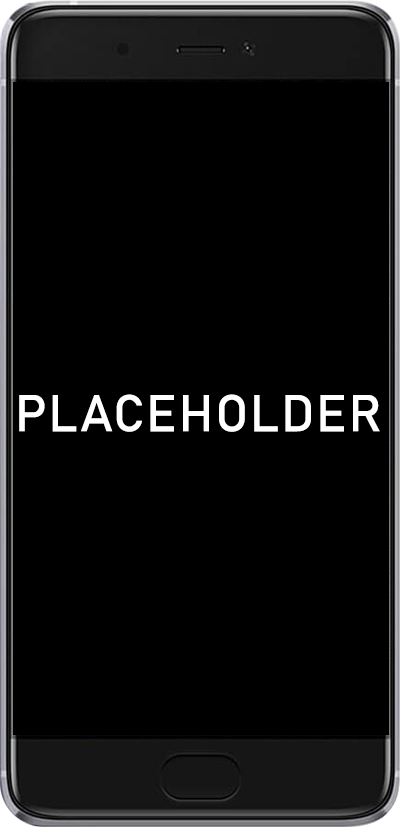
<style>
.page{position:relative;width:400px;height:827px;background:#000000}
.page>*{position:absolute;margin:0}
.t1{font:51px "Bahnschrift";letter-spacing:0.04em;color:#ffffff;text-transform:uppercase;font-weight:bold}
</style>
<div class="page">
<p class="t1" style="left:19px;top:394px;width:361px;height:38px">Placeholder</p>
</div>
